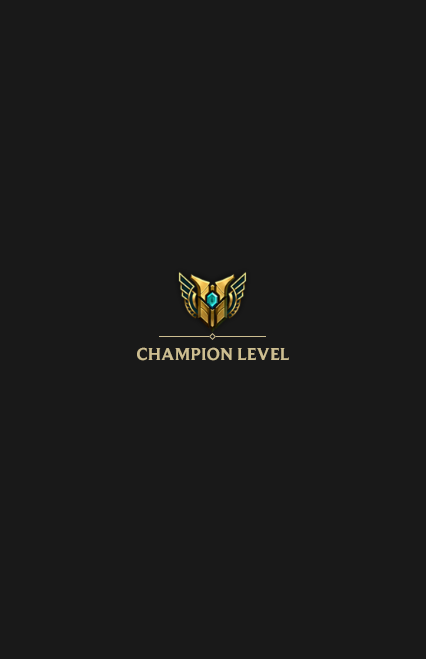
<style>
.page{position:relative;width:426px;height:659px;background:#191919}
.page>*{position:absolute;margin:0}
.t1{font:18px "BeaufortforLOL-Bold";color:#cdbe91}
</style>
<div class="page">
<p class="t1" style="left:137px;top:347px;width:152px;height:14px">CHAMPION LEVEL</p>
</div>
